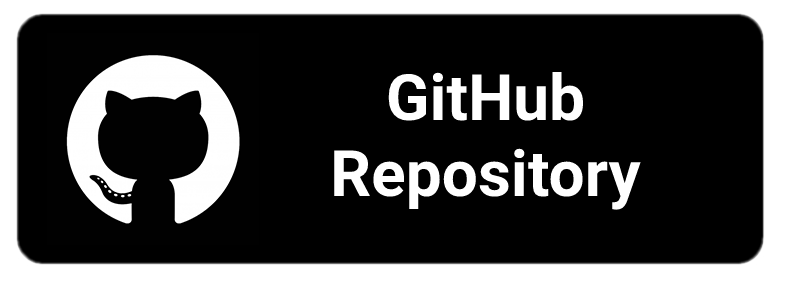
<style>
.page{position:relative;width:786px;height:283px;background:#000000}
.page>*{position:absolute;margin:0}
.t1{font:64px "Roboto-Bold";color:#ffffff}
</style>
<div class="page">
<p class="t1" style="left:334px;top:72px;width:307px;height:138px;text-align:center">GitHub<br>Repository</p>
</div>
